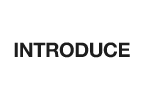
<style>
.page{position:relative;width:145px;height:100px;background:#ffffff}
.page>*{position:absolute;margin:0}
.t1{font:20px "Helvetica75-Bold";letter-spacing:-0.02em;color:#1d1d1d;text-transform:uppercase}
</style>
<div class="page">
<p class="t1" style="left:14px;top:42px;width:116px;height:16px">Introduce</p>
</div>
